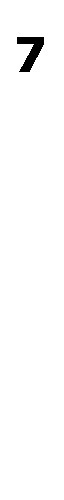
<style>
.page{position:relative;width:64px;height:500px;background:#ffffff}
.page>*{position:absolute;margin:0}
.t1{font:48px "Verdana-Bold";color:#000000}
</style>
<div class="page">
<p class="t1" style="left:17px;top:37px;width:27px;height:35px">7</p>
</div>
